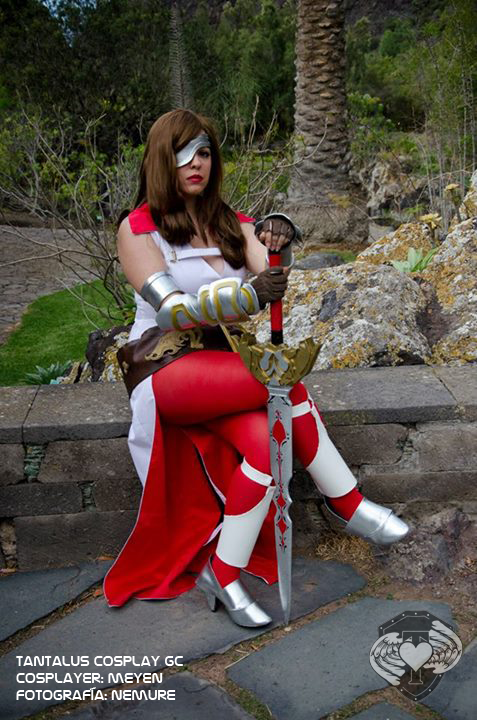
<style>
.page{position:relative;width:477px;height:720px}
.page>*{position:absolute;margin:0}
.t1{font:14px "NasalizationRg-Regular";color:#ffffff}
</style>
<div class="page">
<p class="t1" style="left:16px;top:656px;width:167px;height:44px">tantalus cosplay gc<br>cosplayer: meyen<br>fotografía: nemure</p>
</div>
